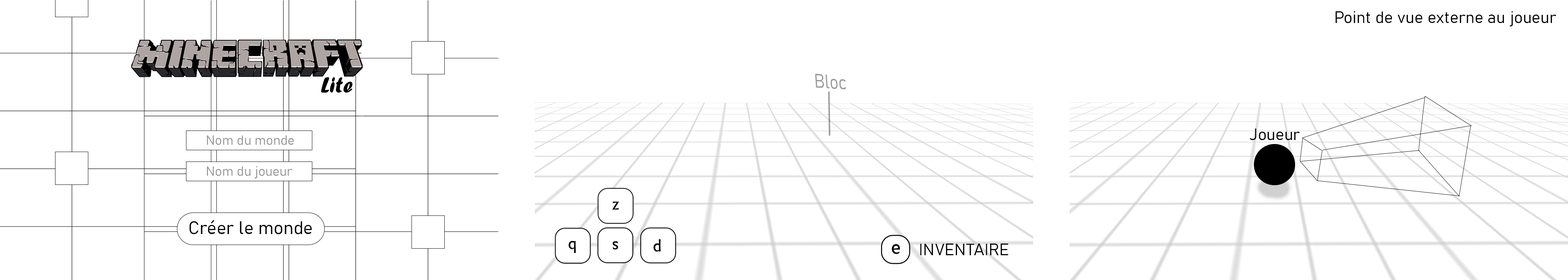
<style>
.page{position:relative;width:1568px;height:280px;background:#ffffff}
.page>*{position:absolute;margin:0}
.t1{font:16.3px "Bahnschrift_321.000wght";color:#000000}
.t2{font:22.8px "ForteMT";color:#000000}
.t3{font:19.5px "Bahnschrift_321.000wght";color:#9a9a9a;scale:0.84 1}
.t4{font:13.1px "Bahnschrift_321.000wght";color:#959595}
.t5{font:18px "Bahnschrift_321.000wght";color:#000000}
</style>
<div class="page">
<p class="t1" style="left:1336px;top:11px;width:220px;height:16px">Point de vue externe au joueur</p>
<p class="t2" style="left:321px;top:77px;width:31px;height:16px">Lite</p>
<p class="t3" style="left:815px;top:74px;width:31px;height:15px;rotate:3deg">Bloc</p>
<p class="t4" style="left:207px;top:135px;width:87px;height:10px">Nom du monde</p>
<p class="t1" style="left:1250px;top:128px;width:50px;height:12px">Joueur</p>
<p class="t4" style="left:207px;top:166px;width:86px;height:13px">Nom du joueur</p>
<p class="t5" style="left:189px;top:220px;width:123px;height:15px">Créer le monde</p>
<p class="t1" style="left:920px;top:244px;width:88px;height:11px">INVENTAIRE</p>
</div>
